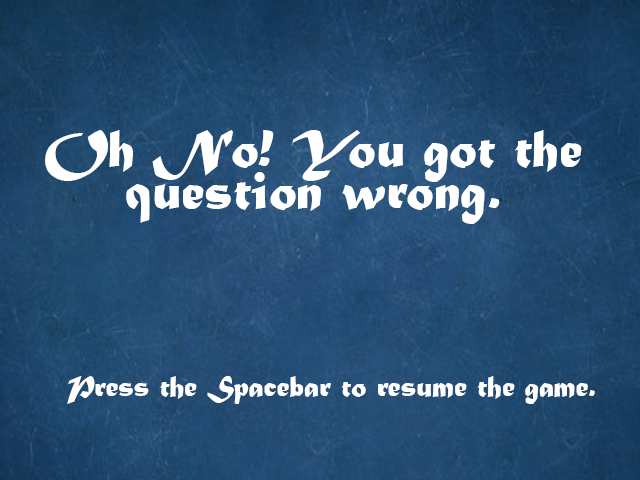
<style>
.page{position:relative;width:640px;height:480px}
.page>*{position:absolute;margin:0}
.t1{font:55.6px/41.7px "MaturaMTScriptCapitals";color:#ffffff}
.t2{font:30.6px "MaturaMTScriptCapitals";color:#ffffff}
</style>
<div class="page">
<p class="t1" style="left:45px;top:130px;width:537px;height:94px;text-align:center">Oh No! You got the<br>question wrong.</p>
<p class="t2" style="left:67px;top:376px;width:528px;height:28px">Press the Spacebar to resume the game.</p>
</div>
